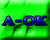
<style>
.page{position:relative;width:50px;height:40px}
.page>*{position:absolute;margin:0}
.t1{font:11.2px "MyungjoXB-HM";scale:1.53 1}
</style>
<div class="page">
<p class="t1" style="left:2px;top:16px;width:45px;height:9px">A-OK</p>
</div>
